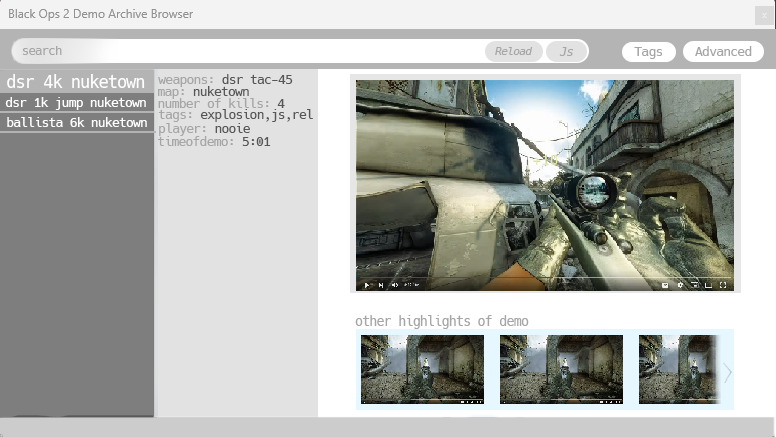
<style>
.page{position:relative;width:776px;height:437px}
.page>*{position:absolute;margin:0}
.t1{font:12.3px "Hack-Regular";letter-spacing:-0.06em;color:#a6a6a6}
.t2{font:11px "Hack-Italic";letter-spacing:-0.06em;color:#a6a6a6}
.t3{font:12px "Hack-Italic";letter-spacing:-0.06em;color:#a6a6a6}
.t4{font:13px "Hack-Regular";letter-spacing:-0.06em;color:#a6a6a6}
.t5{font:17px "Hack-Regular";letter-spacing:-0.06em;color:#ffffff}
.t6{font:13px "Hack-Regular";letter-spacing:-0.06em;color:#575757}
.t7{font:13px "Hack-Regular";letter-spacing:-0.06em;color:#ffffff}
.t8{font:13.3px "Hack-Regular";letter-spacing:-0.06em;color:#a6a6a6}
</style>
<div class="page">
<p class="t1" style="left:22px;top:46px;width:40px;height:9px">search</p>
<p class="t2" style="left:495px;top:47px;width:38px;height:8px">Reload</p>
<p class="t3" style="left:559px;top:47px;width:14px;height:9px">Js</p>
<p class="t4" style="left:634px;top:47px;width:29px;height:12px">Tags</p>
<p class="t4" style="left:695px;top:46px;width:57px;height:10px">Advanced</p>
<p class="t5" style="left:7px;top:74px;width:138px;height:14px">dsr 4k nuketown</p>
<p class="t6" style="left:158px;top:74px;width:135px;height:13px"><span class="t4">weapons: </span>dsr tac-45</p>
<p class="t6" style="left:158px;top:86px;width:91px;height:13px"><span class="t4">map: </span>nuketown</p>
<p class="t7" style="left:5px;top:97px;width:141px;height:13px">dsr 1k jump nuketown</p>
<p class="t4" style="left:158px;top:98px;width:127px;height:10px">number of kills: <span class="t6">4</span></p>
<p class="t6" style="left:158px;top:109px;width:155px;height:13px"><span class="t4">tags: </span>explosion,js,rel</p>
<p class="t7" style="left:7px;top:117px;width:140px;height:10px">ballista 6k nuketown</p>
<p class="t4" style="left:159px;top:123px;width:91px;height:13px">player: <span class="t6">nooie</span></p>
<p class="t4" style="left:158px;top:136px;width:113px;height:10px">timeofdemo: <span class="t6">5:01</span></p>
<p class="t8" style="left:355px;top:315px;width:174px;height:14px">other highlights of demo</p>
</div>
